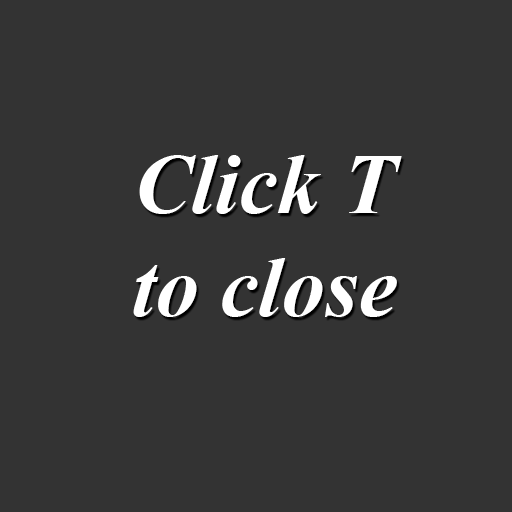
<style>
.page{position:relative;width:512px;height:512px;background:#333333}
.page>*{position:absolute;margin:0}
.t1{font:86px "TimesNewRomanPS-BoldItalicMT";color:#ffffff}
</style>
<div class="page">
<p class="t1" style="left:133px;top:155px;width:269px;height:162px;text-align:center">Click T<br>to close</p>
</div>
